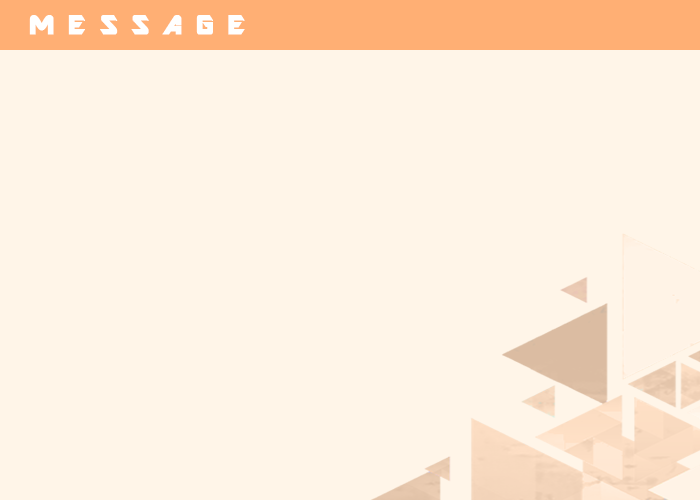
<style>
.page{position:relative;width:700px;height:500px;background:#fff5e8}
.page>*{position:absolute;margin:0}
.t1{font:30px "ARDESTINE";letter-spacing:-0.07em;color:#ffffff;font-weight:bold}
</style>
<div class="page">
<p class="t1" style="left:29px;top:15px;width:216px;height:20px">M E S S A G E</p>
</div>
